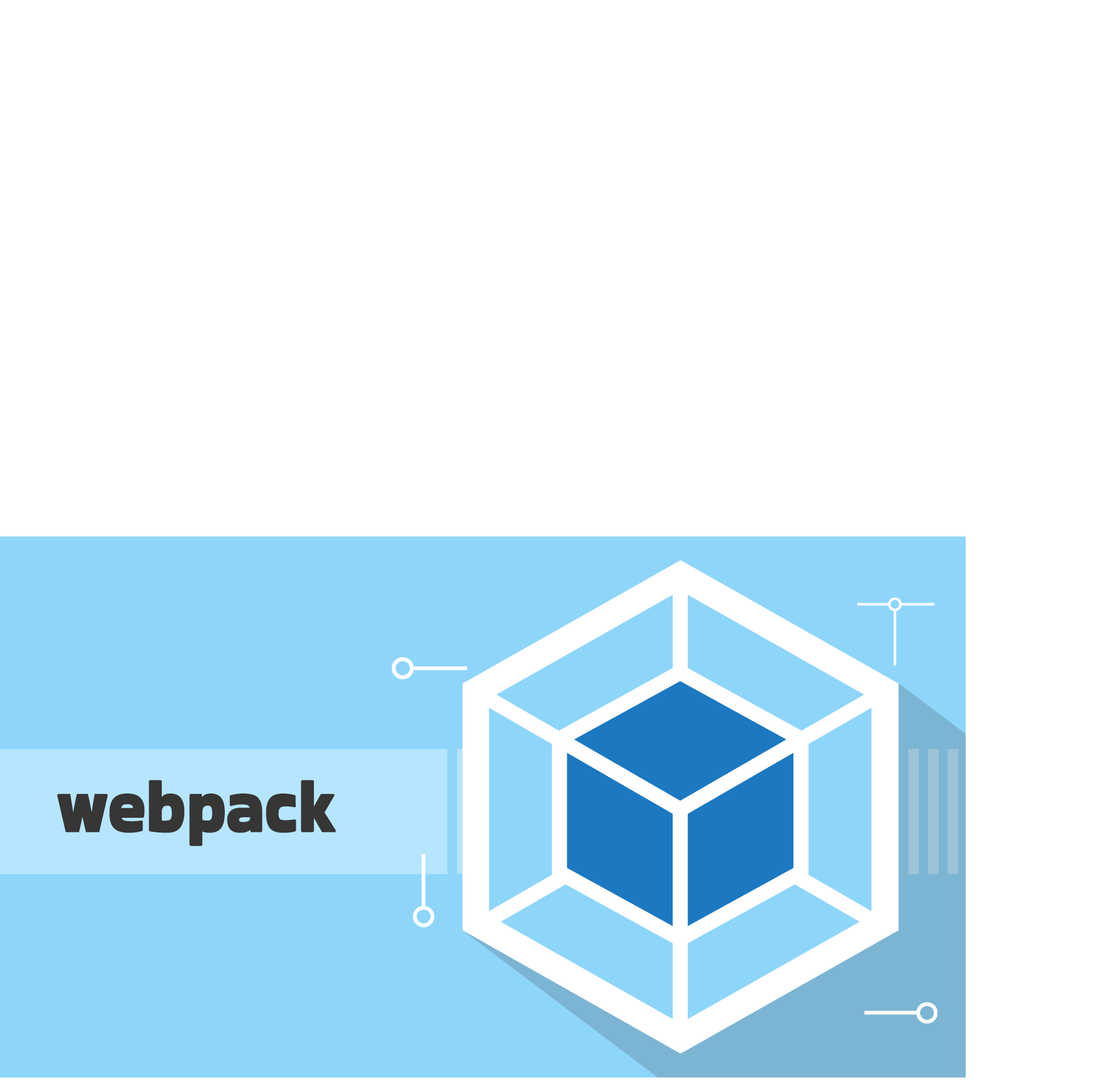
<style>
.page{position:relative;width:1102px;height:1082px;background:#ffffff}
.page>*{position:absolute;margin:0}
.t1{font:74.4px "BakbakOne-Regular";letter-spacing:-0.01em;color:#363635;font-weight:bold;scale:0.91 1}
</style>
<div class="page">
<p class="t1" style="left:57px;top:780px;width:279px;height:66px">webpack</p>
</div>
